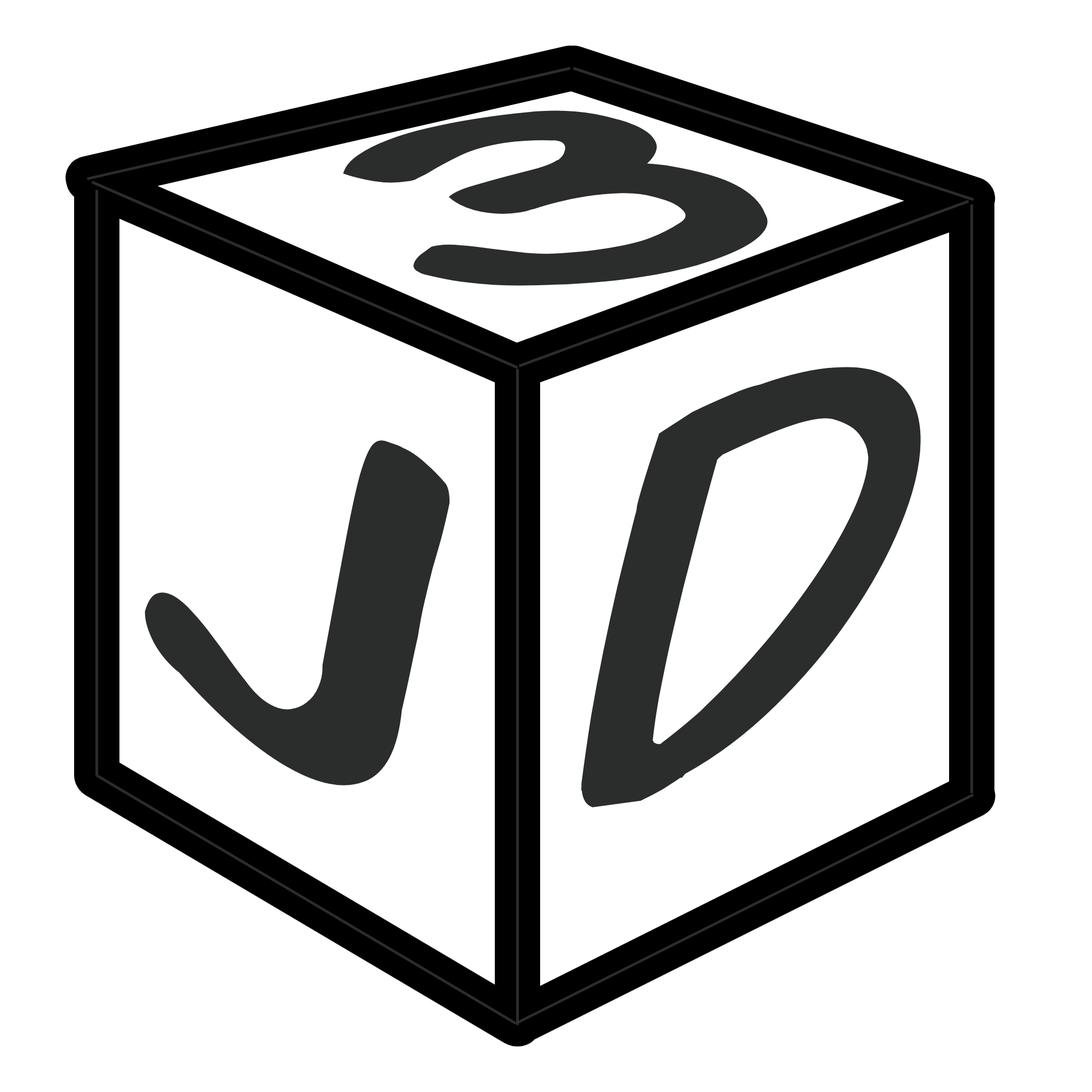
<style>
.page{position:relative;width:1092px;height:1092px;background:#ffffff}
.page>*{position:absolute;margin:0}
.t1{font:437px "KomikaDisplay";color:#2b2c2c;scale:1.45 1}
.t2{font:519.4px "KomikaDisplay";color:#2b2c2c;scale:1.08 1}
.t3{font:536.4px "KomikaDisplay";color:#2b2c2c;scale:1.16 1}
</style>
<div class="page">
<p class="t1" style="left:343px;top:109px;width:428px;height:177px;rotate:-9deg">3</p>
<p class="t2" style="left:581px;top:365px;width:340px;height:443px;rotate:-26deg">D</p>
<p class="t3" style="left:144px;top:438px;width:306px;height:356px;rotate:30deg">J</p>
</div>
